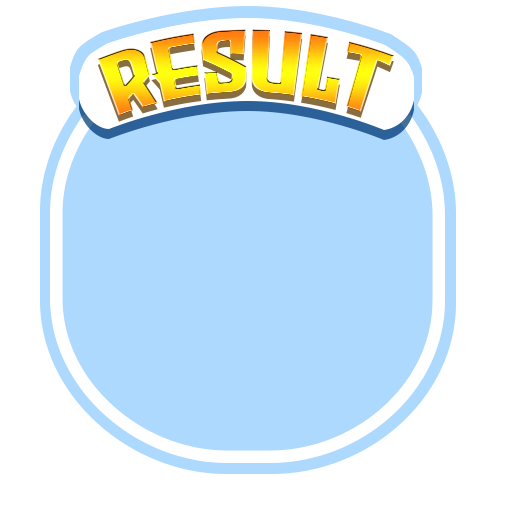
<style>
.page{position:relative;width:512px;height:512px;background:#add9fe}
.page>*{position:absolute;margin:0}
.t1{font:21.7px "EvilEmpire";scale:1.05 1}
</style>
<div class="page">
<p class="t1" style="left:97px;top:29px;width:297px;height:87px">RESULT</p>
</div>
